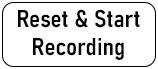
<style>
.page{position:relative;width:158px;height:69px;background:#ffffff}
.page>*{position:absolute;margin:0}
.t1{font:24px "Bahnschrift-SemiBoldSemiCondensed";color:#000000}
</style>
<div class="page">
<p class="t1" style="left:18px;top:9px;width:122px;height:51px;text-align:center">Reset &amp; Start<br>Recording</p>
</div>
